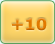
<style>
.page{position:relative;width:55px;height:44px}
.page>*{position:absolute;margin:0}
.t1{font:16px "Verdana-Bold";color:#e27a00}
</style>
<div class="page">
<p class="t1" style="left:12px;top:18px;width:35px;height:13px">+10</p>
</div>
